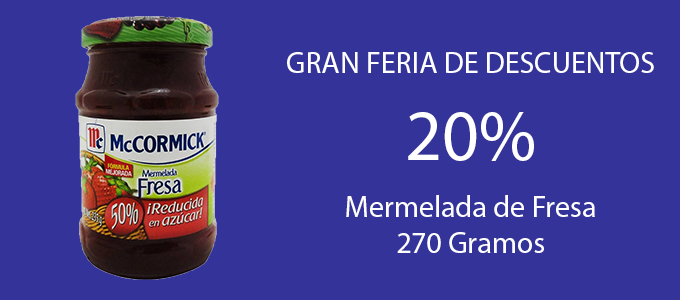
<style>
.page{position:relative;width:680px;height:300px;background:#333399}
.page>*{position:absolute;margin:0}
.t1{font:30px "MyriadPro-Regular";color:#ffffff}
.t2{font:72px "MyriadPro-Regular";color:#ffffff}
</style>
<div class="page">
<p class="t1" style="left:287px;top:52px;width:367px;height:109px;text-align:center">GRAN FERIA DE DESCUENTOS<br><span class="t2">20%</span></p>
<p class="t1" style="left:346px;top:195px;width:249px;height:58px;text-align:center">Mermelada de Fresa<br>270 Gramos</p>
</div>
